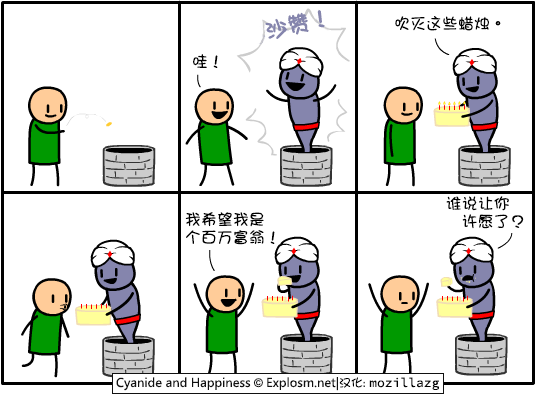
<style>
.page{position:relative;width:536px;height:395px;background:#ffffff}
.page>*{position:absolute;margin:0}
.t1{font:22px "DFGirl";color:#8585ad;font-weight:bold}
.t2{font:16px "DFGirl";color:#000000}
.t3{font:16px/18px "DFGirl";color:#000000}
</style>
<div class="page">
<p class="t1" style="left:265px;top:9px;width:60px;height:30px;rotate:-14deg">沙赞！</p>
<p class="t2" style="left:395px;top:16px;width:106px;height:15px">吹灭这些蜡烛。</p>
<p class="t2" style="left:193px;top:54px;width:25px;height:14px">哇！</p>
<p class="t3" style="left:446px;top:196px;width:78px;height:33px">谁说让你<br>     许愿了？</p>
<p class="t3" style="left:185px;top:212px;width:90px;height:33px">我希望我是<br>个百万富翁！</p>
</div>
